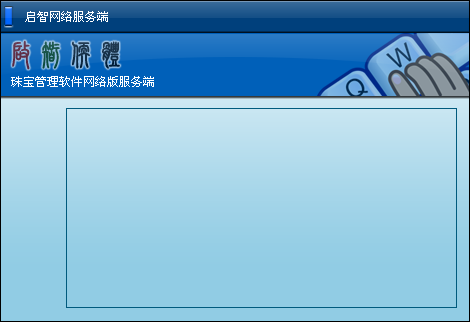
<style>
.page{position:relative;width:470px;height:322px}
.page>*{position:absolute;margin:0}
.t1{font:12px "SimSun";color:#ffffff}
.t2{font:30px "HYj3gf"}
</style>
<div class="page">
<p class="t1" style="left:25px;top:11px;width:83px;height:11px">启智网络服务端</p>
<p class="t2" style="left:12px;top:40px;width:108px;height:30px">启智软体</p>
<p class="t1" style="left:11px;top:76px;width:143px;height:11px">珠宝管理软件网络版服务端</p>
</div>
